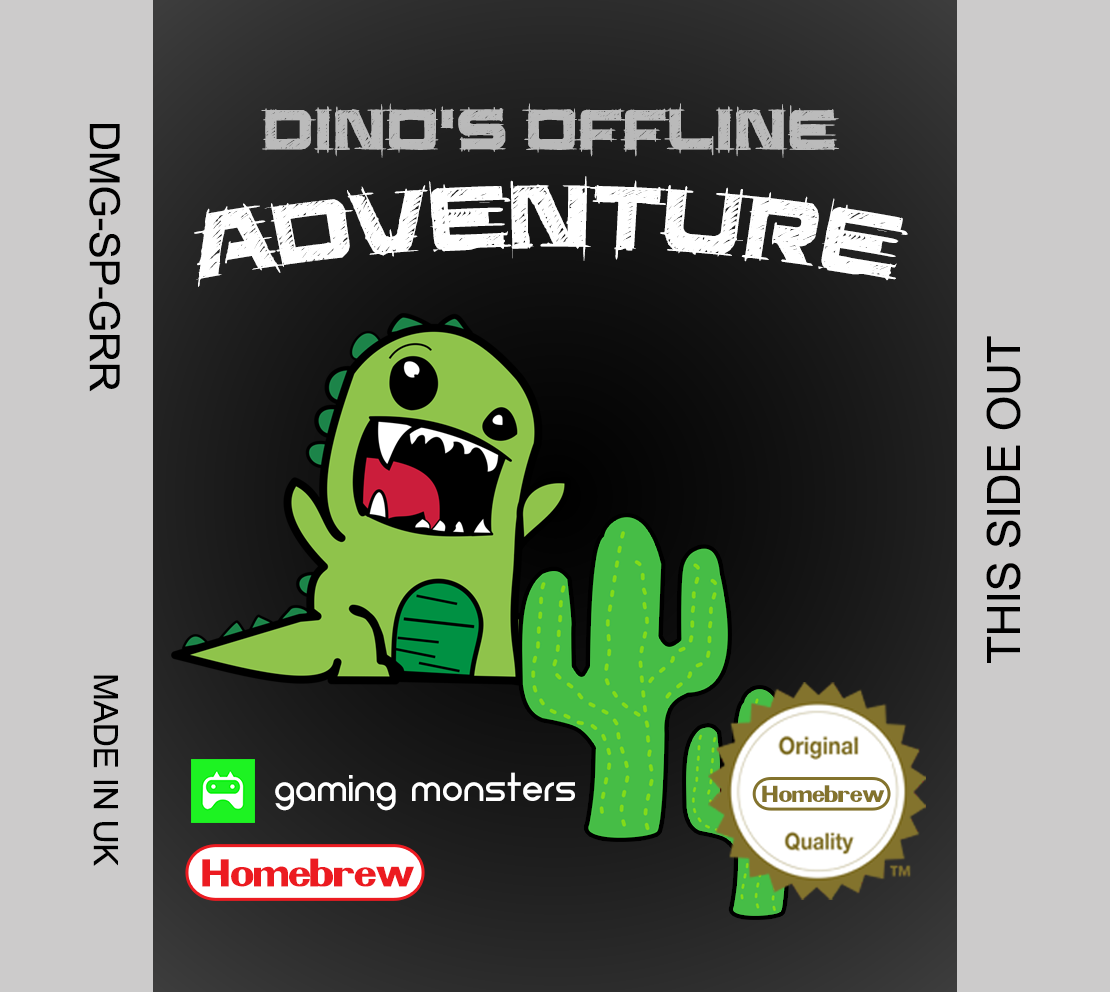
<style>
.page{position:relative;width:1110px;height:992px;background:#cccbcb}
.page>*{position:absolute;margin:0}
.t1{font:66.6px "SaucerBB";letter-spacing:-0.008em;color:#bababa}
.t2{font:41.7px "ArialMT";letter-spacing:-0.008em;color:#000000}
.t3{font:33.3px "ArialMT";letter-spacing:-0.008em;color:#000000}
.t4{font:103.2px "SaucerBB";letter-spacing:-0.008em;color:#ffffff}
.t5{font:45.8px "ArialMT";letter-spacing:-0.008em;color:#000000}
.t6{font:45.7px "Neometric-Medium";color:#ffffff}
.t7{font:20.7px "Pretendo";letter-spacing:-0.025em;color:#83732d}
.t8{font:35px "Pretendo";letter-spacing:-0.025em;color:#ec1b21}
</style>
<div class="page">
<p class="t1" style="left:261px;top:103px;width:578px;height:55px">DINO’S OFFLINE</p>
<p class="t2" style="left:89px;top:124px;width:32px;height:742px;rotate:90deg">DMG-SP-GRR                         <span class="t3">MADE IN UK</span></p>
<p class="t4" style="left:194px;top:176px;width:714px;height:111px">ADVENTURE</p>
<p class="t5" style="left:986px;top:336px;width:35px;height:327px;rotate:-90deg">THIS SIDE OUT</p>
<p class="t6" style="left:275px;top:772px;width:300px;height:39px">gaming monsters</p>
<p class="t7" style="left:762px;top:785px;width:123px;height:17px">Homebrew</p>
<p class="t8" style="left:202px;top:858px;width:212px;height:29px">Homebrew</p>
</div>
